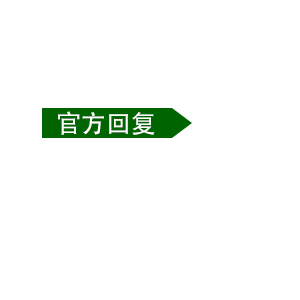
<style>
.page{position:relative;width:300px;height:300px;background:#ffffff}
.page>*{position:absolute;margin:0}
.t1{font:25px "AdobeHeitiStd-Regular";color:#fefefe}
</style>
<div class="page">
<p class="t1" style="left:58px;top:111px;width:97px;height:24px">官方回复</p>
</div>
